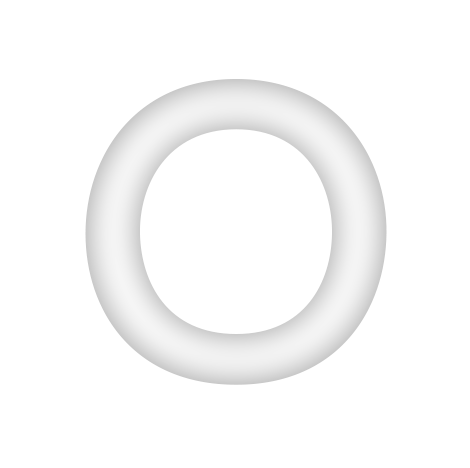
<style>
.page{position:relative;width:470px;height:468px;background:#ffffff}
.page>*{position:absolute;margin:0}
.t1{font:418.7px "NexaBold";color:#e7e7e7}
</style>
<div class="page">
<p class="t1" style="left:85px;top:79px;width:302px;height:306px">O</p>
</div>
